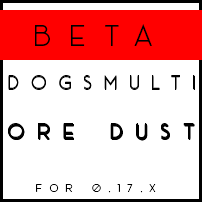
<style>
.page{position:relative;width:202px;height:202px;background:#ffffff}
.page>*{position:absolute;margin:0}
.t1{font:31.1px "AceSansDemo";letter-spacing:0.58em;color:#000000}
.t2{font:20.1px "AceSansDemo";letter-spacing:0.58em;color:#000000}
.t3{font:22.1px "AceSansDemo";letter-spacing:0.58em;color:#000000}
.t4{font:12px "AceSansDemo";letter-spacing:0.58em;color:#000000}
</style>
<div class="page">
<p class="t1" style="left:35px;top:24px;width:117px;height:22px">BETA</p>
<p class="t2" style="left:8px;top:75px;width:187px;height:14px">DOGSMULTI</p>
<p class="t2" style="left:8px;top:76px;width:187px;height:14px">DOGSMULTI</p>
<p class="t3" style="left:8px;top:123px;width:186px;height:16px">ORE DUST</p>
<p class="t3" style="left:8px;top:124px;width:186px;height:16px">ORE DUST</p>
<p class="t3" style="left:8px;top:125px;width:187px;height:16px">ORE DUST</p>
<p class="t3" style="left:9px;top:124px;width:186px;height:16px">ORE DUST</p>
<p class="t3" style="left:9px;top:125px;width:186px;height:16px">ORE DUST</p>
<p class="t4" style="left:36px;top:184px;width:120px;height:9px">FOR 0.17.X</p>
</div>
